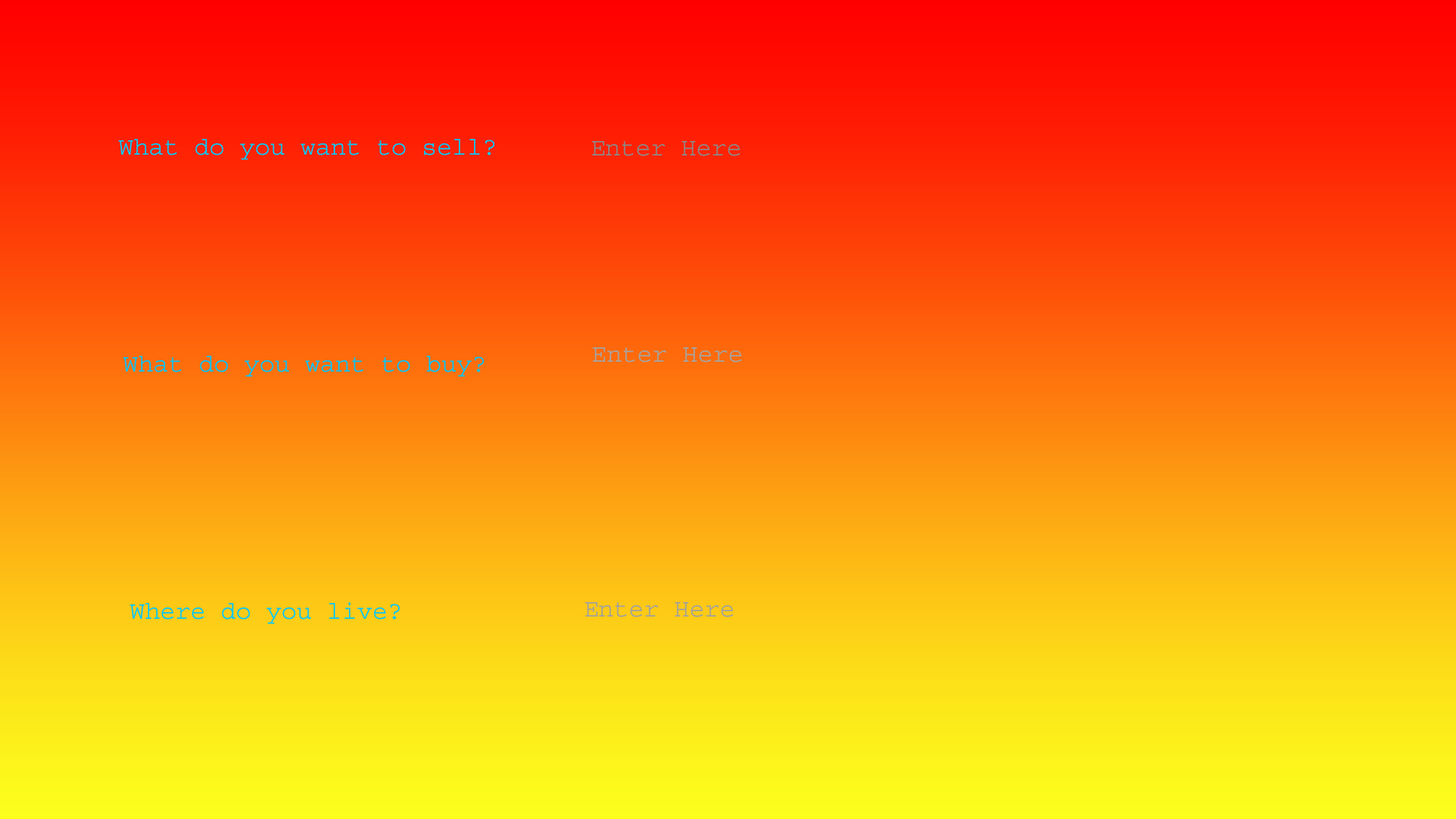
<style>
.page{position:relative;width:1456px;height:819px}
.page>*{position:absolute;margin:0}
.t1{font:25.3px "Courier";color:#00ccff}
.t2{font:25.3px "Courier";color:#8b8989}
.t3{font:25.3px "Courier";color:#a4a5a5}
.t4{font:25.3px "Courier";color:#00c6ff}
.t5{font:25.3px "Courier";color:#9fa0a0}
</style>
<div class="page">
<p class="t1" style="left:118px;top:139px;width:376px;height:21px">What do you want to sell?</p>
<p class="t2" style="left:591px;top:141px;width:149px;height:15px">Enter Here</p>
<p class="t3" style="left:592px;top:347px;width:150px;height:15px">Enter Here</p>
<p class="t4" style="left:123px;top:356px;width:361px;height:21px">What do you want to buy?</p>
<p class="t4" style="left:130px;top:602px;width:270px;height:22px">Where do you live?</p>
<p class="t5" style="left:585px;top:602px;width:148px;height:15px">Enter Here</p>
</div>
